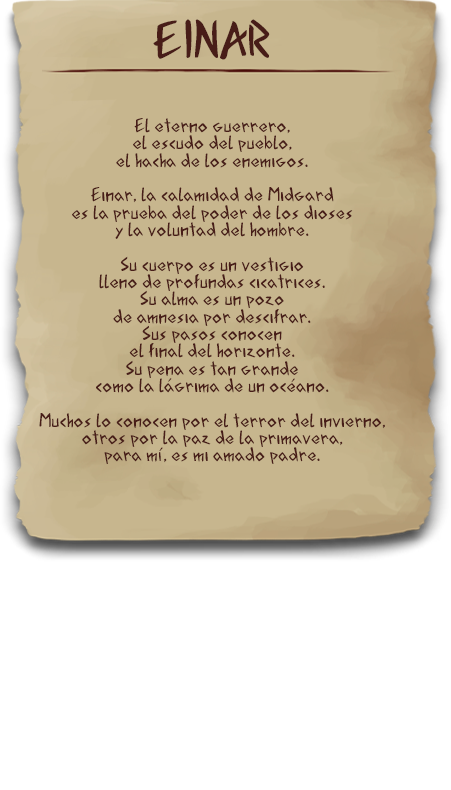
<style>
.page{position:relative;width:451px;height:790px;background:#ffffff}
.page>*{position:absolute;margin:0}
.t1{font:48px "AcadianRunes-Regular";color:#481d18}
.t2{font:17.9px "AcadianRunes-Regular";color:#481d18}
</style>
<div class="page">
<p class="t1" style="left:153px;top:19px;width:117px;height:41px">EINAR</p>
<p class="t2" style="left:39px;top:118px;width:346px;height:346px;text-align:center">El eterno guerrero,<br>el escudo del pueblo,<br>el hacha de los enemigos.<br><br>Einar, la calamidad de Midgard<br>es la prueba del poder de los dioses<br>y la voluntad del hombre.<br><br>Su cuerpo es un vestigio<br>lleno de profundas cicatrices.<br>Su alma es un pozo<br>de amnesia por descifrar.<br>Sus pasos conocen<br>el final del horizonte.<br>Su pena es tan grande<br>como la lágrima de un océano.<br><br>Muchos lo conocen por el terror del invierno,<br>otros por la paz de la primavera,<br>para mí, es mi amado padre.</p>
</div>
